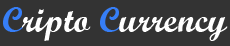
<style>
.page{position:relative;width:230px;height:46px;background:#333333}
.page>*{position:absolute;margin:0}
.t1{font:36px "ScriptMTBold";color:#ffffff}
.t2{font:36px "ScriptMTBold";color:#367ef7}
</style>
<div class="page">
<p class="t1" style="left:3px;top:7px;width:225px;height:34px"><span class="t2">C</span>ripto <span class="t2">C</span>urrency</p>
</div>
